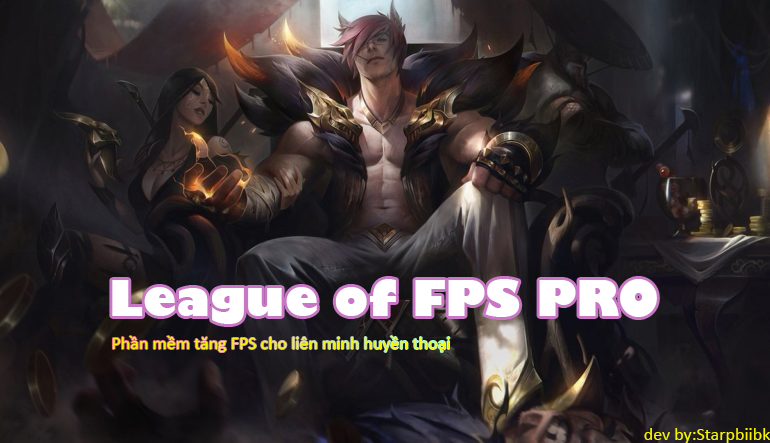
<style>
.page{position:relative;width:770px;height:443px}
.page>*{position:absolute;margin:0}
.t1{font:48px "GillSans-UltraBold";color:#ffffff}
.t2{font:18px "Calibri";color:#f8f400}
</style>
<div class="page">
<p class="t1" style="left:112px;top:279px;width:545px;height:45px">League of FPS PRO</p>
<p class="t2" style="left:112px;top:336px;width:338px;height:16px">Phần mềm tăng FPS cho liên minh huyền thoại</p>
<p class="t2" style="left:644px;top:428px;width:127px;height:15px">dev by:Starpbiibk</p>
</div>
